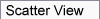
<style>
.page{position:relative;width:100px;height:19px;background:#fafafa}
.page>*{position:absolute;margin:0}
.t1{font:14px "ArialMT";color:#000000}
</style>
<div class="page">
<p class="t1" style="left:6px;top:5px;width:78px;height:11px">Scatter View</p>
</div>
